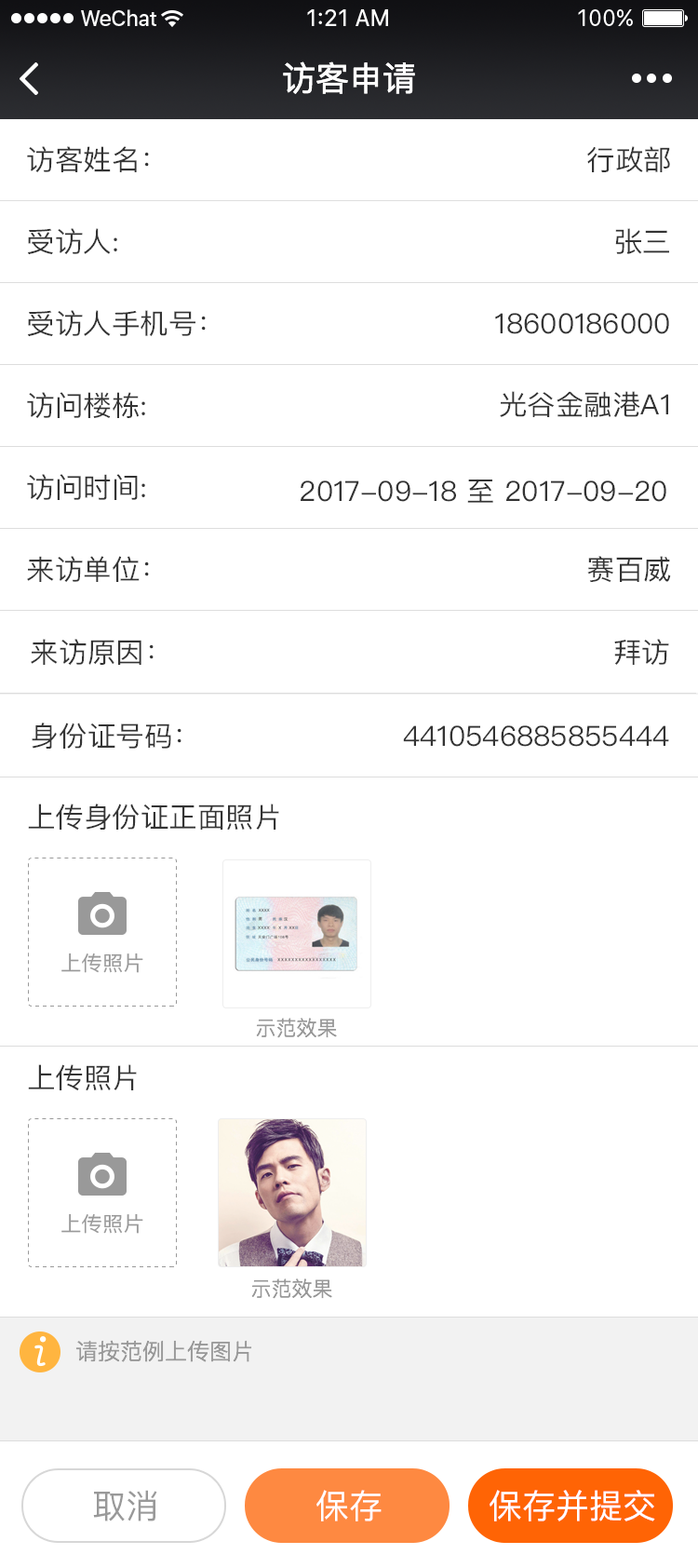
<style>
.page{position:relative;width:698px;height:1568px;background:#ffffff}
.page>*{position:absolute;margin:0}
.t1{font:33.5px "PingFangSC-Regular";color:#ffffff}
.t2{font:27.9px "PingFangSC-Regular";color:#333333}
.t3{font:20.5px "PingFang-SC-Medium";color:#999999}
.t4{font:20.5px "PingFangSC-Light";color:#999999}
.t5{font:22.3px "PingFangSC-Light";color:#999999}
.t6{font:33.5px "PingFangSC-Regular";color:#999999}
</style>
<div class="page">
<p class="t1" style="left:283px;top:61px;width:132px;height:33px">访客申请</p>
<p class="t2" style="left:27px;top:146px;width:122px;height:26px">访客姓名：</p>
<p class="t2" style="left:588px;top:146px;width:82px;height:26px">行政部</p>
<p class="t2" style="left:27px;top:228px;width:90px;height:26px">受访人:</p>
<p class="t2" style="left:615px;top:228px;width:54px;height:26px">张三</p>
<p class="t2" style="left:27px;top:310px;width:179px;height:26px">受访人手机号：</p>
<p class="t2" style="left:495px;top:313px;width:174px;height:21px">18600186000</p>
<p class="t2" style="left:27px;top:392px;width:118px;height:26px">访问楼栋:</p>
<p class="t2" style="left:500px;top:391px;width:169px;height:26px">光谷金融港A1</p>
<p class="t2" style="left:27px;top:474px;width:118px;height:26px">访问时间:</p>
<p class="t2" style="left:301px;top:480px;width:366px;height:23px">2017-09-18 至 2017-09-20</p>
<p class="t2" style="left:27px;top:556px;width:122px;height:26px">来访单位：</p>
<p class="t2" style="left:588px;top:556px;width:83px;height:27px">赛百威</p>
<p class="t2" style="left:31px;top:639px;width:123px;height:26px">来访原因：</p>
<p class="t2" style="left:615px;top:639px;width:54px;height:26px">拜访</p>
<p class="t2" style="left:32px;top:723px;width:150px;height:26px">身份证号码：</p>
<p class="t2" style="left:403px;top:725px;width:266px;height:22px">4410546885855444</p>
<p class="t2" style="left:28px;top:804px;width:251px;height:27px">上传身份证正面照片</p>
<p class="t3" style="left:61px;top:953px;width:82px;height:20px">上传照片</p>
<p class="t4" style="left:256px;top:1018px;width:81px;height:20px">示范效果</p>
<p class="t2" style="left:28px;top:1064px;width:109px;height:27px">上传照片</p>
<p class="t3" style="left:61px;top:1213px;width:82px;height:21px">上传照片</p>
<p class="t4" style="left:251px;top:1278px;width:81px;height:21px">示范效果</p>
<p class="t5" style="left:75px;top:1340px;width:177px;height:22px">请按范例上传图片</p>
<p class="t6" style="left:93px;top:1490px;width:64px;height:31px">取消</p>
<p class="t1" style="left:317px;top:1490px;width:65px;height:31px">保存</p>
<p class="t1" style="left:490px;top:1490px;width:166px;height:31px">保存并提交</p>
</div>
